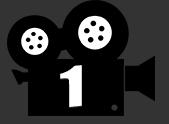
<style>
.page{position:relative;width:169px;height:124px;background:#000000}
.page>*{position:absolute;margin:0}
.t1{font:51.3px "Impact";color:#ffffff;scale:1.26 1}
</style>
<div class="page">
<p class="t1" style="left:60px;top:65px;width:22px;height:42px;rotate:-6deg">1</p>
</div>
